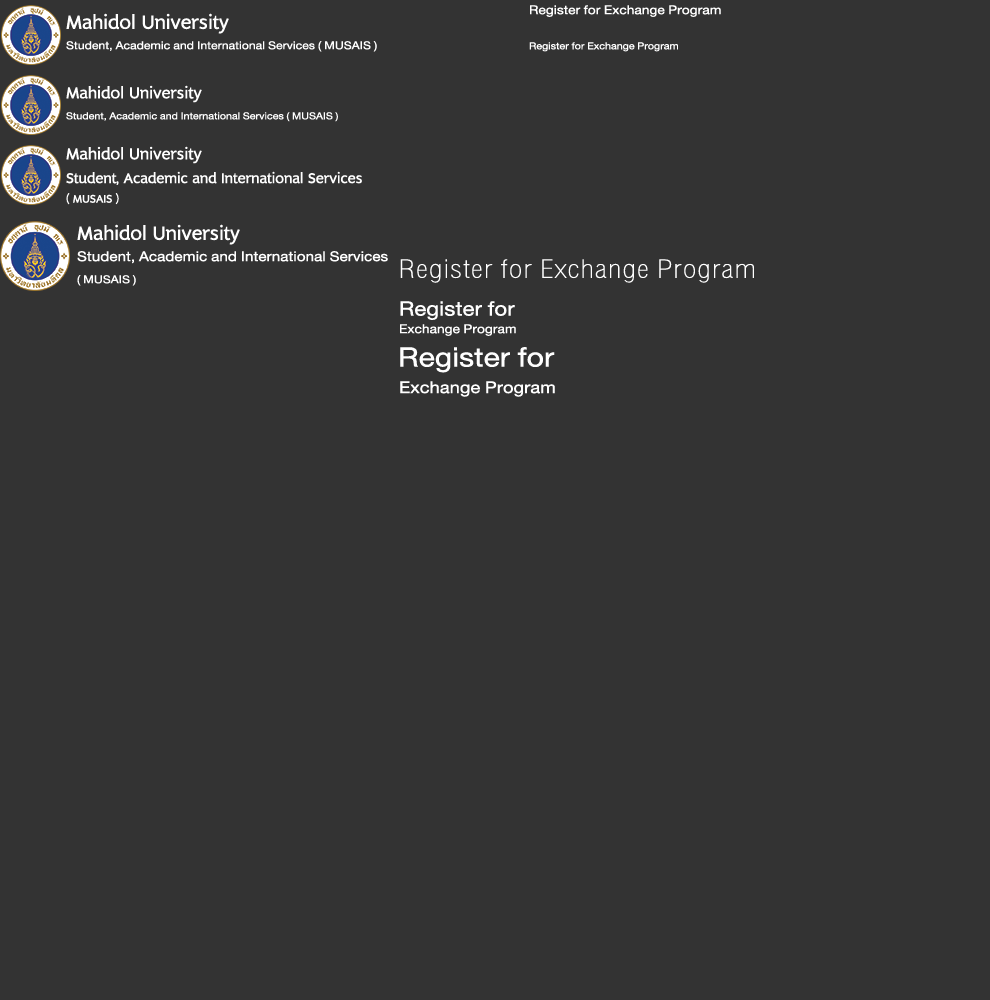
<style>
.page{position:relative;width:990px;height:1000px;background:#333333}
.page>*{position:absolute;margin:0}
.t1{font:18px "DBHelvethaicaX-55Regular";color:#ffffff;scale:1.13 1}
.t2{font:24px "DBLimX";color:#ffffff}
.t3{font:16px "DBHelvethaicaX-55Regular";color:#ffffff;scale:1.13 1}
.t4{font:14px "DBHelvethaicaX-55Regular";color:#ffffff;scale:1.13 1}
.t5{font:20px "DBLimX";color:#ffffff}
.t6{font:18px "DBLimX";color:#ffffff}
.t7{font:14px "DBLimX";color:#ffffff}
.t8{font:20px "DBHelvethaicaX-55Regular";color:#ffffff;scale:1.13 1}
.t9{font:36px "DBHelvethaicaX-37ThinCond";color:#ffffff;scale:1.13 1}
.t10{font:29.2px "DBHelvethaicaX-55Regular";color:#ffffff;scale:1.13 1}
.t11{font:39.4px "DBHelvethaicaX-55Regular";color:#ffffff;scale:1.13 1}
.t12{font:24px "DBHelvethaicaX-55Regular";color:#ffffff;scale:1.13 1}
</style>
<div class="page">
<p class="t1" style="left:530px;top:5px;width:191px;height:12px">Register for Exchange Program</p>
<p class="t2" style="left:66px;top:13px;width:163px;height:21px">Mahidol University</p>
<p class="t3" style="left:66px;top:41px;width:311px;height:11px">Student, Academic and International Services ( MUSAIS )</p>
<p class="t4" style="left:529px;top:42px;width:149px;height:10px">Register for Exchange Program</p>
<p class="t5" style="left:66px;top:85px;width:136px;height:18px">Mahidol University</p>
<p class="t4" style="left:66px;top:112px;width:272px;height:10px">Student, Academic and International Services ( MUSAIS )</p>
<p class="t5" style="left:66px;top:146px;width:136px;height:18px">Mahidol University</p>
<p class="t6" style="left:66px;top:171px;width:296px;height:14px">Student, Academic and International Services</p>
<p class="t7" style="left:66px;top:193px;width:53px;height:12px">( MUSAIS )</p>
<p class="t2" style="left:77px;top:224px;width:163px;height:21px">Mahidol University</p>
<p class="t8" style="left:77px;top:251px;width:311px;height:13px">Student, Academic and International Services</p>
<p class="t9" style="left:400px;top:259px;width:354px;height:24px">Register for Exchange Program</p>
<p class="t3" style="left:77px;top:275px;width:59px;height:11px">( MUSAIS )</p>
<p class="t10" style="left:400px;top:301px;width:115px;height:19px">Register for</p>
<p class="t1" style="left:400px;top:324px;width:116px;height:12px">Exchange Program</p>
<p class="t11" style="left:400px;top:347px;width:155px;height:26px">Register for</p>
<p class="t12" style="left:400px;top:381px;width:155px;height:16px">Exchange Program</p>
</div>
